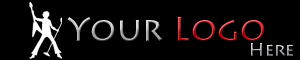
<style>
.page{position:relative;width:300px;height:60px;background:#000000}
.page>*{position:absolute;margin:0}
.t1{font:34px "LithosPro-Regular"}
.t2{font:18px "LithosPro-Regular"}
</style>
<div class="page">
<p class="t1" style="left:67px;top:17px;width:198px;height:24px">Your Logo</p>
<p class="t2" style="left:251px;top:43px;width:43px;height:13px">Here</p>
</div>
